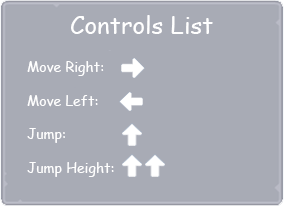
<style>
.page{position:relative;width:284px;height:206px;background:#a8abb5}
.page>*{position:absolute;margin:0}
.t1{font:24px "ComicSansMS";color:#ffffff}
.t2{font:14px "ComicSansMS";color:#ffffff}
</style>
<div class="page">
<p class="t1" style="left:71px;top:15px;width:142px;height:19px">Controls List</p>
<p class="t2" style="left:27px;top:61px;width:87px;height:116px">Move Right:<br><br>Move Left:<br><br>Jump:<br><br>Jump Height:</p>
</div>
